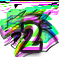
<style>
.page{position:relative;width:59px;height:57px}
.page>*{position:absolute;margin:0}
.t1{font:37.5px "ElanITCStd-Bold";font-variant:small-caps}
</style>
<div class="page">
<p class="t1" style="left:22px;top:15px;width:18px;height:26px">2</p>
</div>
